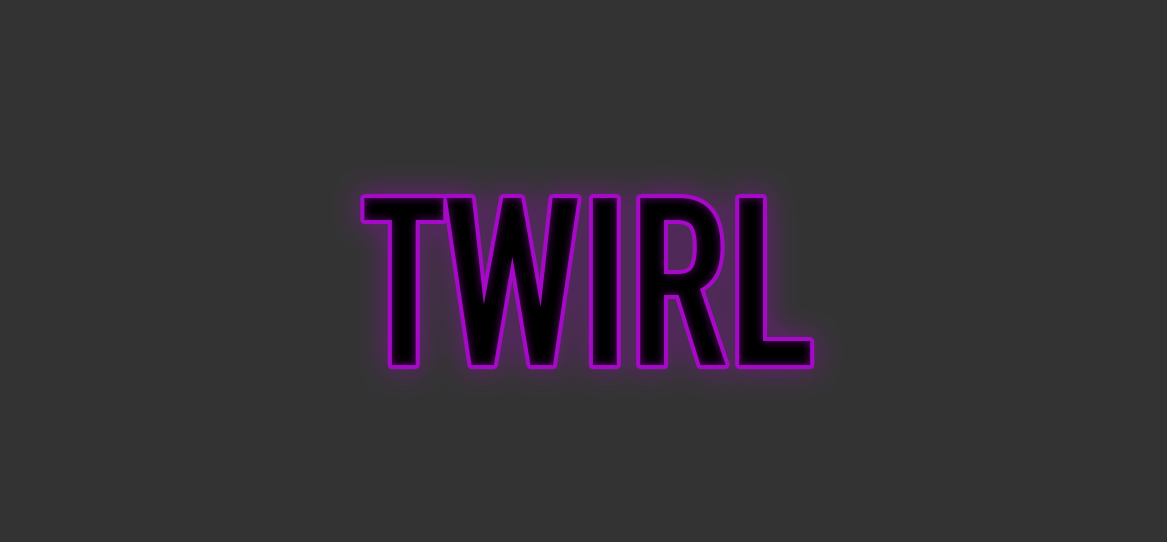
<style>
.page{position:relative;width:1167px;height:542px;background:#333333}
.page>*{position:absolute;margin:0}
.t1{font:233.7px "DINEngschrift";color:#070009}
</style>
<div class="page">
<p class="t1" style="left:364px;top:197px;width:447px;height:169px">TWIRL</p>
</div>
